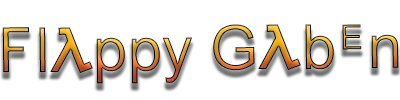
<style>
.page{position:relative;width:400px;height:100px;background:#ffffff}
.page>*{position:absolute;margin:0}
.t1{font:61.9px "HalfLife"}
</style>
<div class="page">
<p class="t1" style="left:2px;top:24px;width:397px;height:60px;rotate:-1deg">Flappy Gaben</p>
</div>
